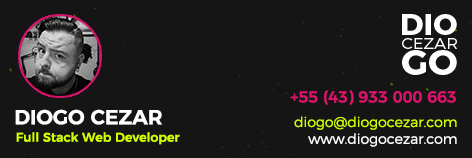
<style>
.page{position:relative;width:472px;height:158px;background:#151515}
.page>*{position:absolute;margin:0}
.t1{font:16px "Montserrat-Medium";color:#dc136d}
.t2{font:20.4px "Montserrat-SemiBold";color:#ffffff}
.t3{font:14px "Montserrat-Light";color:#d1fe00}
.t4{font:14px "Montserrat-Light";color:#ffffff}
.t5{font:12.6px "Montserrat-Medium";color:#d1fe00}
</style>
<div class="page">
<p class="t1" style="left:290px;top:90px;width:166px;height:15px">+55 (43) 933 000 663</p>
<p class="t2" style="left:15px;top:109px;width:147px;height:16px">DIOGO CEZAR</p>
<p class="t3" style="left:294px;top:116px;width:163px;height:31px;text-align:right">diogo@diogocezar.com<br><span class="t4">www.diogocezar.com</span></p>
<p class="t5" style="left:16px;top:132px;width:164px;height:13px">Full Stack Web Developer</p>
</div>
